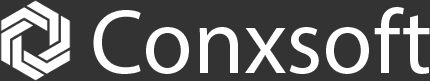
<style>
.page{position:relative;width:430px;height:81px;background:#333333}
.page>*{position:absolute;margin:0}
.t1{font:92px "MyriadPro-Regular";color:#ffffff}
</style>
<div class="page">
<p class="t1" style="left:93px;top:7px;width:337px;height:67px">Conxsoft</p>
</div>
